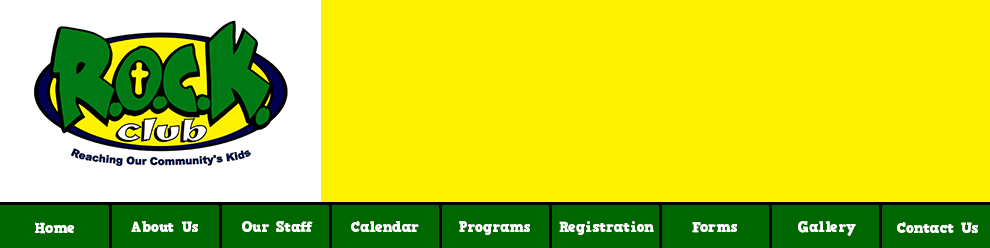
<style>
.page{position:relative;width:990px;height:248px;background:#fef200}
.page>*{position:absolute;margin:0}
.t1{font:14.6px "HVDComicSerifPro";color:#ffffff}
</style>
<div class="page">
<p class="t1" style="left:35px;top:222px;width:40px;height:12px">Home</p>
<p class="t1" style="left:131px;top:221px;width:67px;height:11px">About Us</p>
<p class="t1" style="left:242px;top:221px;width:71px;height:11px">Our Staff</p>
<p class="t1" style="left:351px;top:221px;width:68px;height:11px">Calendar</p>
<p class="t1" style="left:459px;top:221px;width:71px;height:14px">Programs</p>
<p class="t1" style="left:559px;top:221px;width:95px;height:14px">Registration</p>
<p class="t1" style="left:692px;top:222px;width:45px;height:11px">Forms</p>
<p class="t1" style="left:798px;top:221px;width:58px;height:15px">Gallery</p>
<p class="t1" style="left:897px;top:222px;width:81px;height:11px">Contact Us</p>
</div>
